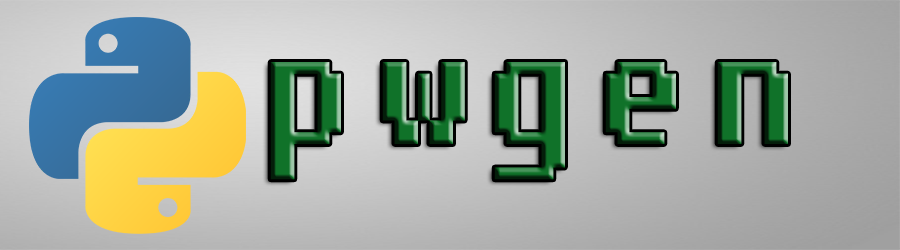
<style>
.page{position:relative;width:900px;height:250px}
.page>*{position:absolute;margin:0}
.t1{font:150px "Fixedsys";letter-spacing:0.12em}
</style>
<div class="page">
<p class="t1" style="left:270px;top:62px;width:518px;height:118px">pwgen</p>
</div>
